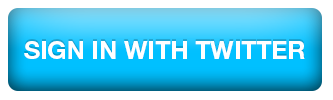
<style>
.page{position:relative;width:333px;height:100px;background:#ffffff}
.page>*{position:absolute;margin:0}
.t1{font:24.8px "HelveticaNeueLTPro-Bd";color:#ffffff}
</style>
<div class="page">
<p class="t1" style="left:24px;top:41px;width:281px;height:18px">SIGN IN WITH TWITTER</p>
</div>
